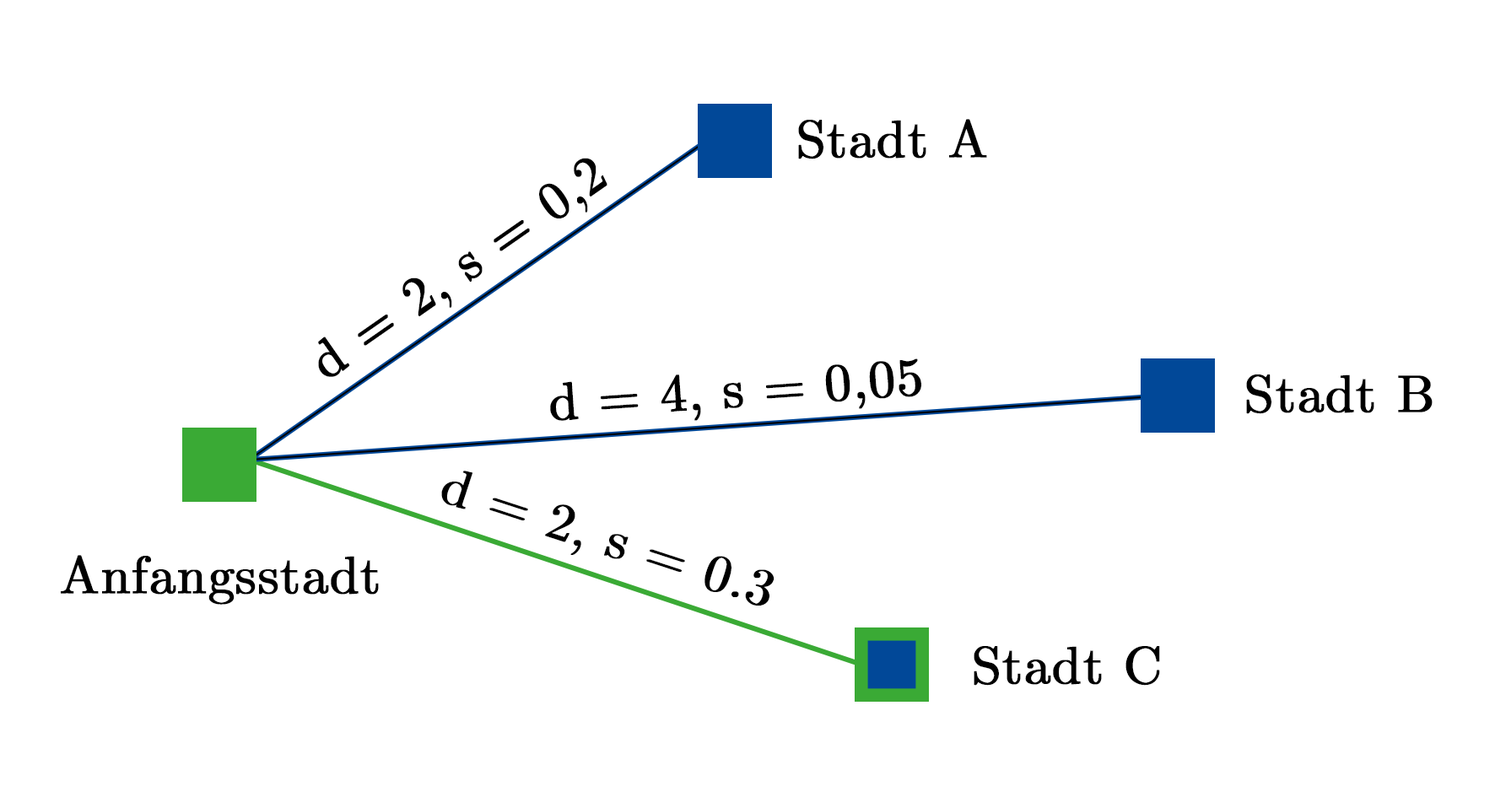
<style>
.page{position:relative;width:1495px;height:797px;background:#ffffff}
.page>*{position:absolute;margin:0}
.t1{font:52.8px "LMRoman10-Regular";color:#000000;font-weight:bold}
</style>
<div class="page">
<p class="t1" style="left:798px;top:119px;width:189px;height:40px">Stadt A</p>
<p class="t1" style="left:318px;top:158px;width:290px;height:219px;text-align:center">d = 2, s = 0,2</p>
<p class="t1" style="left:550px;top:359px;width:371px;height:62px">d = 4, s = 0,05</p>
<p class="t1" style="left:1246px;top:375px;width:187px;height:39px">Stadt B</p>
<p class="t1" style="left:441px;top:471px;width:334px;height:135px;text-align:center">d = 2, s = 0.3</p>
<p class="t1" style="left:61px;top:555px;width:318px;height:50px">Anfangsstadt</p>
<p class="t1" style="left:974px;top:646px;width:186px;height:40px">Stadt C</p>
</div>
